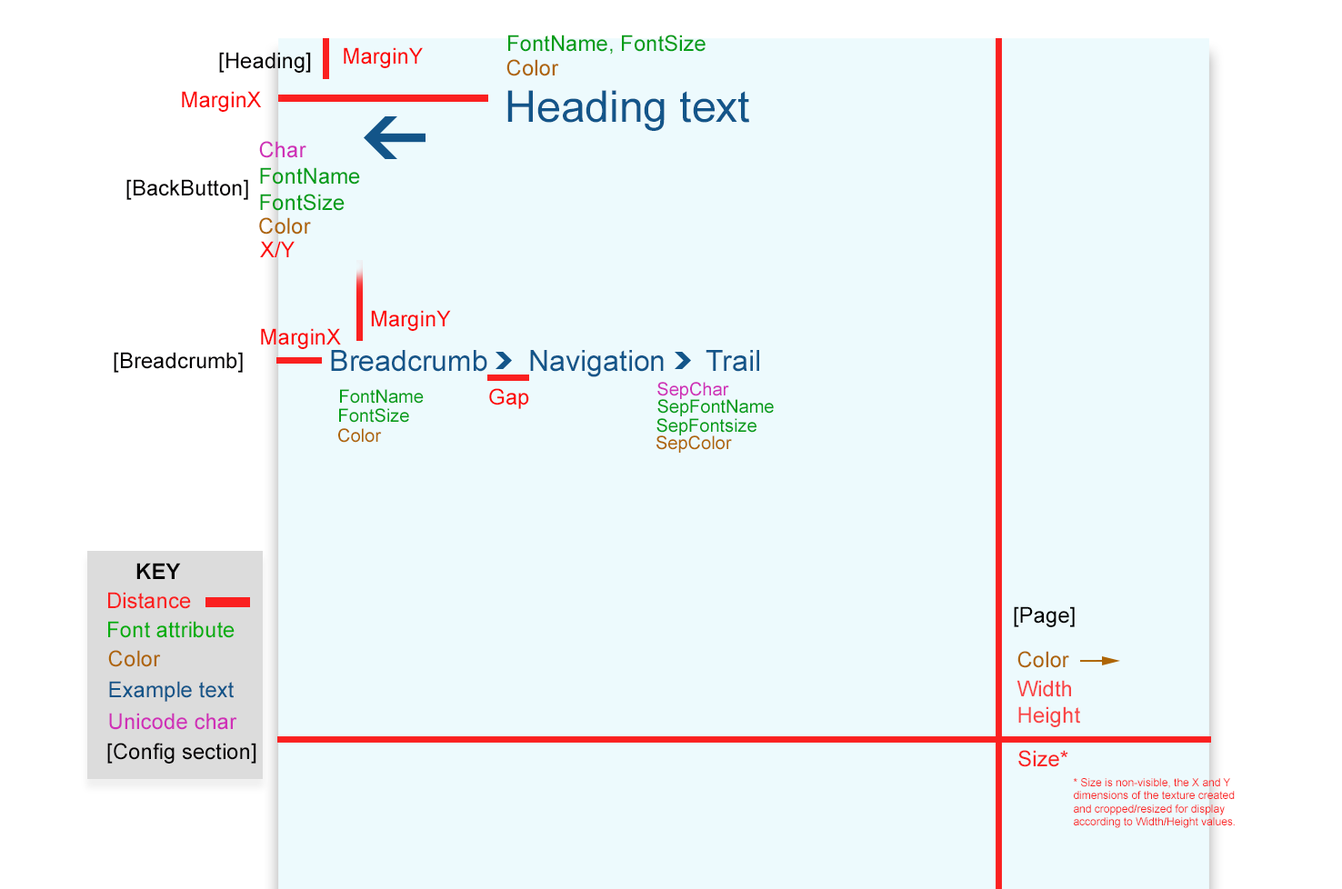
<style>
.page{position:relative;width:1342px;height:889px;background:#edfafd}
.page>*{position:absolute;margin:0}
.t1{font:21.8px "ArialMT";color:#039d18}
.t2{font:21.8px "ArialMT";color:#020001}
.t3{font:21.8px "ArialMT";color:#fc0707}
.t4{font:21.8px "ArialMT";color:#ae6505}
.t5{font:43.6px "ArialMT";color:#135589}
.t6{font:21.8px "ArialMT";color:#cf30b7}
.t7{font:29.1px "ArialMT";color:#135589}
.t8{font:18.2px "ArialMT";color:#039d18}
.t9{font:18.2px "ArialMT";color:#cf30b7}
.t10{font:18.2px "ArialMT";color:#ae6505}
.t11{font:21.8px "Arial-BoldMT";color:#000000}
.t12{font:21.8px "ArialMT";color:#fa2020}
.t13{font:21.8px "ArialMT";color:#000000}
.t14{font:21.8px "ArialMT";color:#05ad0e}
.t15{font:21.8px "ArialMT";color:#135589}
.t16{font:21.8px "ArialMT";color:#f94546}
.t17{font:10.9px "ArialMT";color:#fa2020}
</style>
<div class="page">
<p class="t1" style="left:508px;top:35px;width:197px;height:20px">FontName, FontSize</p>
<p class="t2" style="left:219px;top:52px;width:92px;height:21px">[Heading]</p>
<p class="t3" style="left:344px;top:47px;width:79px;height:21px">MarginY</p>
<p class="t4" style="left:506px;top:59px;width:53px;height:17px">Color</p>
<p class="t5" style="left:507px;top:90px;width:242px;height:41px">Heading text</p>
<p class="t3" style="left:182px;top:91px;width:80px;height:21px">MarginX</p>
<p class="t6" style="left:259px;top:141px;width:47px;height:17px">Char</p>
<p class="t1" style="left:260px;top:167px;width:100px;height:44px">FontName<br>FontSize</p>
<p class="t2" style="left:126px;top:179px;width:122px;height:21px">[BackButton]</p>
<p class="t4" style="left:259px;top:217px;width:52px;height:17px">Color</p>
<p class="t3" style="left:260px;top:241px;width:34px;height:16px">X/Y</p>
<p class="t3" style="left:371px;top:310px;width:80px;height:21px">MarginY</p>
<p class="t3" style="left:261px;top:328px;width:80px;height:21px">MarginX</p>
<p class="t2" style="left:114px;top:352px;width:129px;height:21px">[Breadcrumb]</p>
<p class="t7" style="left:331px;top:350px;width:428px;height:27px">Breadcrumb     Navigation     Trail</p>
<p class="t8" style="left:340px;top:389px;width:84px;height:15px">FontName</p>
<p class="t3" style="left:489px;top:388px;width:40px;height:21px">Gap</p>
<p class="t9" style="left:657px;top:382px;width:72px;height:17px">SepChar</p>
<p class="t8" style="left:657px;top:399px;width:116px;height:17px">SepFontName</p>
<p class="t8" style="left:339px;top:408px;width:70px;height:15px">FontSize</p>
<p class="t8" style="left:656px;top:418px;width:100px;height:17px">SepFontsize</p>
<p class="t10" style="left:338px;top:428px;width:44px;height:15px">Color</p>
<p class="t10" style="left:656px;top:435px;width:76px;height:18px">SepColor</p>
<p class="t11" style="left:136px;top:563px;width:45px;height:16px">KEY</p>
<p class="t12" style="left:108px;top:592px;width:83px;height:17px">Distance</p>
<p class="t13" style="left:1013px;top:606px;width:61px;height:21px">[Page]</p>
<p class="t14" style="left:108px;top:621px;width:126px;height:17px">Font attribute</p>
<p class="t4" style="left:108px;top:650px;width:53px;height:17px">Color</p>
<p class="t4" style="left:1017px;top:651px;width:52px;height:17px">Color</p>
<p class="t15" style="left:109px;top:681px;width:125px;height:21px">Example text</p>
<p class="t16" style="left:1016px;top:680px;width:64px;height:47px">Width<br>Height</p>
<p class="t6" style="left:109px;top:713px;width:128px;height:17px">Unicode char</p>
<p class="t2" style="left:107px;top:743px;width:149px;height:20px">[Config section]</p>
<p class="t12" style="left:1018px;top:750px;width:50px;height:17px">Size*</p>
<p class="t17" style="left:1072px;top:778px;width:162px;height:50px">* Size is non-visible, the X and Y dimensions of the texture created and cropped/resized for display according to Width/Height values.</p>
</div>
